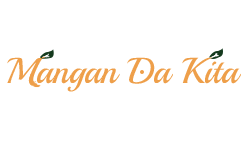
<style>
.page{position:relative;width:250px;height:150px;background:#ffffff}
.page>*{position:absolute;margin:0}
.t1{font:36px "Playball-Regular";color:#ee9f4a}
</style>
<div class="page">
<p class="t1" style="left:7px;top:57px;width:234px;height:35px">Mangan Da Kita</p>
</div>
